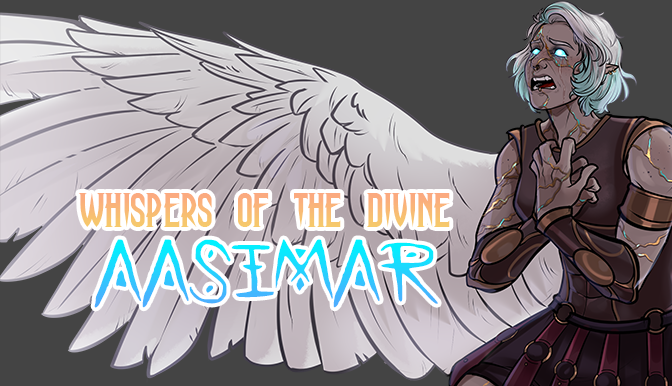
<style>
.page{position:relative;width:672px;height:386px;background:#444444}
.page>*{position:absolute;margin:0}
.t1{font:48px "HauntingAttraction";color:#f9b678}
.t2{font:72px "BattleMage"}
</style>
<div class="page">
<p class="t1" style="left:79px;top:193px;width:371px;height:34px">Whispers of the Divine</p>
<p class="t2" style="left:94px;top:239px;width:344px;height:69px">Aasimar</p>
</div>
